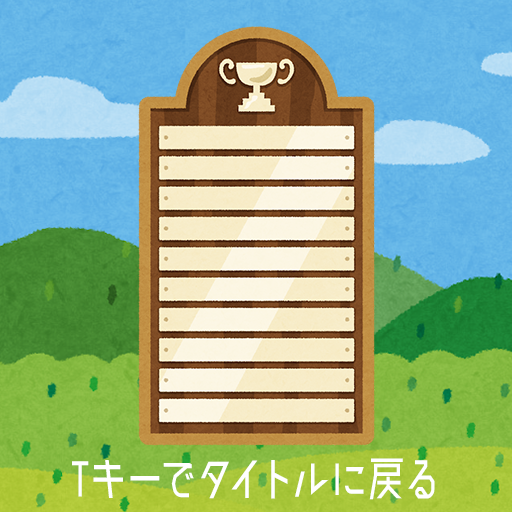
<style>
.page{position:relative;width:512px;height:512px}
.page>*{position:absolute;margin:0}
.t1{font:52.1px "Makinas-Flat-5";color:#ffffff;scale:0.8 1}
</style>
<div class="page">
<p class="t1" style="left:72px;top:458px;width:363px;height:42px">Tキーでタイトルに戻る</p>
</div>
